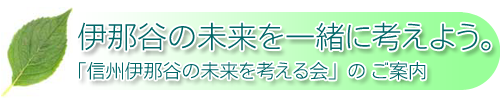
<style>
.page{position:relative;width:500px;height:100px;background:#ffffff}
.page>*{position:absolute;margin:0}
.t1{font:30px "NfMotoyaCedar-W1-90mskp-RKSJ-H";color:#006666}
.t2{font:19px "FMotoyaCedar-W1-90mskp-RKSJ-H";color:#006666}
</style>
<div class="page">
<p class="t1" style="left:78px;top:22px;width:413px;height:29px">伊那谷の未来を一緒に考えよう。</p>
<p class="t2" style="left:79px;top:62px;width:347px;height:18px">「信州伊那谷の未来を考える会」の ご案内</p>
</div>
